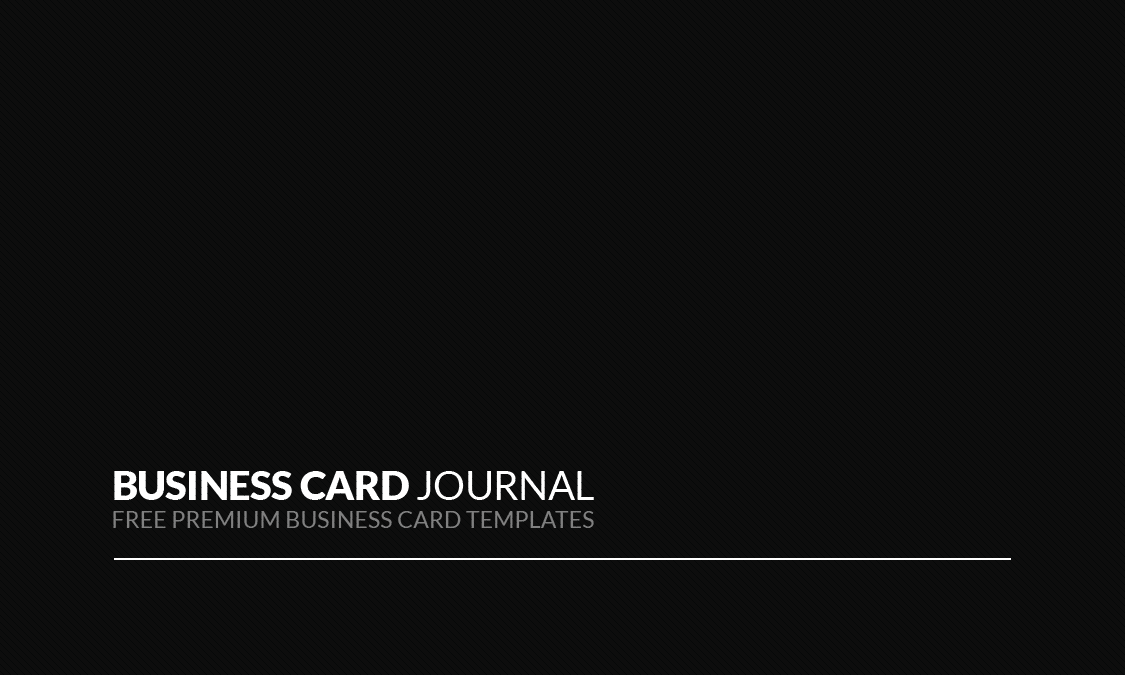
<style>
.page{position:relative;width:1125px;height:675px;background:#0d0d0d}
.page>*{position:absolute;margin:0}
.t1{font:39.6px "Lato-Black";letter-spacing:-0.01em;color:#ffffff;text-transform:uppercase}
.t2{font:39.6px "Lato-Regular";letter-spacing:-0.01em;color:#ffffff;text-transform:uppercase}
.t3{font:22.9px "Lato-Regular";letter-spacing:0.005em;color:#808080;text-transform:uppercase}
</style>
<div class="page">
<p class="t1" style="left:114px;top:471px;width:480px;height:29px">Business Card <span class="t2">Journal</span></p>
<p class="t3" style="left:113px;top:511px;width:481px;height:17px">Free Premium Business Card Templates</p>
</div>
